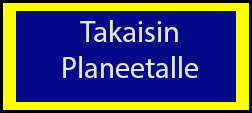
<style>
.page{position:relative;width:252px;height:113px;background:#040a87}
.page>*{position:absolute;margin:0}
.t1{font:30px "MyriadPro-Regular";color:#e6e6e6}
</style>
<div class="page">
<p class="t1" style="left:63px;top:20px;width:135px;height:58px;text-align:center">Takaisin <br>Planeetalle</p>
</div>
